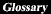
<style>
.page{position:relative;width:51px;height:14px;background:#000000}
.page>*{position:absolute;margin:0}
.t1{font:12px "TimesNewRomanPS-BoldMT";color:#fdfdfe;font-style:italic}
</style>
<div class="page">
<p class="t1" style="left:3px;top:2px;width:45px;height:12px">Glossary</p>
</div>
